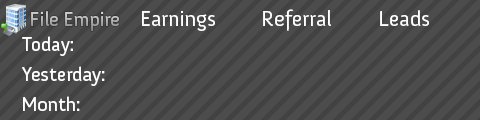
<style>
.page{position:relative;width:480px;height:120px;background:#4c4c4c}
.page>*{position:absolute;margin:0}
.t1{font:20px "Anivers-Regular";color:#b4b4b4}
.t2{font:22px "Anivers-Regular";color:#ffffff}
.t3{font:20px "Anivers-Regular";color:#ffffff}
</style>
<div class="page">
<p class="t1" style="left:31px;top:11px;width:88px;height:20px">File Empire</p>
<p class="t2" style="left:142px;top:11px;width:73px;height:20px">Earnings</p>
<p class="t2" style="left:263px;top:9px;width:68px;height:22px">Referral</p>
<p class="t2" style="left:380px;top:10px;width:49px;height:16px">Leads</p>
<p class="t3" style="left:22px;top:36px;width:51px;height:20px">Today:</p>
<p class="t3" style="left:22px;top:66px;width:83px;height:20px">Yesterday:</p>
<p class="t3" style="left:23px;top:96px;width:57px;height:15px">Month:</p>
</div>
